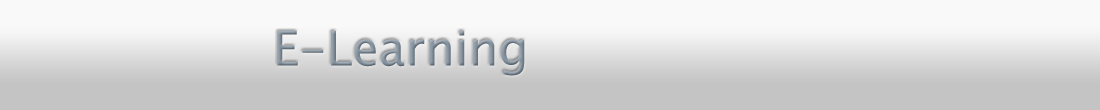
<style>
.page{position:relative;width:1100px;height:110px;background:#f9f9f9}
.page>*{position:absolute;margin:0}
.t1{font:48px "LucidaSansUnicode"}
</style>
<div class="page">
<p class="t1" style="left:277px;top:30px;width:248px;height:46px">E-Learning</p>
</div>
